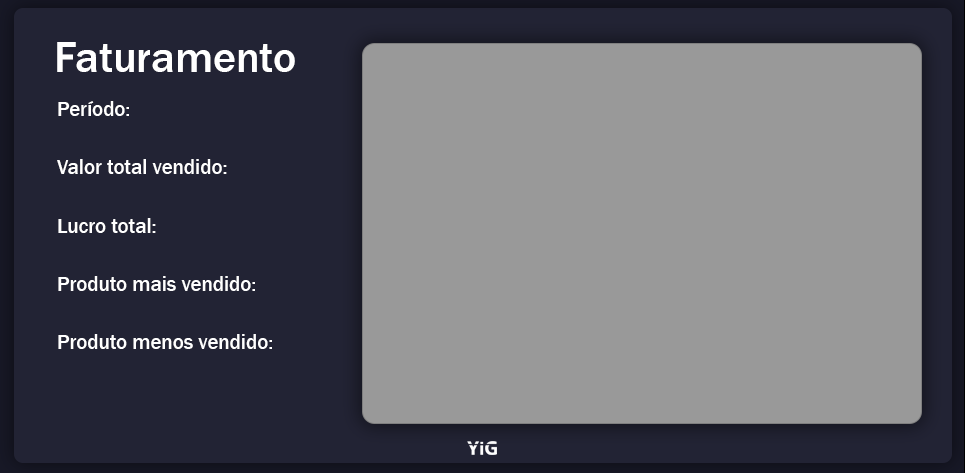
<style>
.page{position:relative;width:965px;height:473px;background:#999999}
.page>*{position:absolute;margin:0}
.t1{font:43.7px "FranklinGothic-Medium";color:#ffffff}
.t2{font:20.8px/58.3px "FranklinGothic-Medium";color:#ffffff}
</style>
<div class="page">
<p class="t1" style="left:57px;top:42px;width:238px;height:30px">Faturamento</p>
<p class="t2" style="left:57px;top:101px;width:215px;height:248px">Período:<br>Valor total vendido:<br>Lucro total:<br>Produto mais vendido:<br>Produto menos vendido:</p>
</div>
